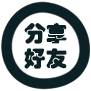
<style>
.page{position:relative;width:91px;height:91px;background:#ffffff}
.page>*{position:absolute;margin:0}
.t1{font:22px "STHupo";color:#0c2125}
</style>
<div class="page">
<p class="t1" style="left:24px;top:23px;width:43px;height:21px">分享</p>
<p class="t1" style="left:24px;top:48px;width:43px;height:21px">好友</p>
</div>
